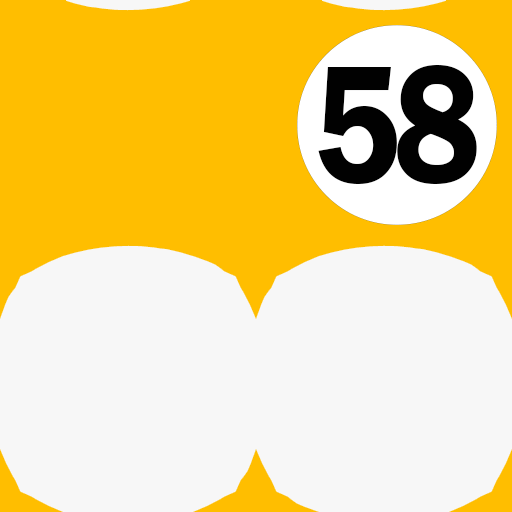
<style>
.page{position:relative;width:512px;height:512px;background:#f7f7f7}
.page>*{position:absolute;margin:0}
.t1{font:172.5px "FranklinGothic-Demi";letter-spacing:-0.05em;color:#010101;scale:0.87 1}
</style>
<div class="page">
<p class="t1" style="left:318px;top:65px;width:159px;height:119px">58</p>
</div>
